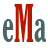
<style>
.page{position:relative;width:48px;height:48px;background:#ffffff}
.page>*{position:absolute;margin:0}
.t1{font:48.8px "GloucesterMT-ExtraCondensed";color:#486666;scale:0.78 1}
.t2{font:48.8px "GloucesterMT-ExtraCondensed";color:#b61701;scale:0.78 1}
</style>
<div class="page">
<p class="t1" style="left:2px;top:4px;width:44px;height:38px">e<span class="t2">M</span>a</p>
</div>
